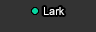
<style>
.page{position:relative;width:96px;height:32px;background:#333333}
.page>*{position:absolute;margin:0}
.t1{font:11px "ArialMT";color:#ffffff}
</style>
<div class="page">
<p class="t1" style="left:43px;top:7px;width:22px;height:8px">Lark</p>
<p class="t1" style="left:44px;top:7px;width:21px;height:8px">Lark</p>
</div>
